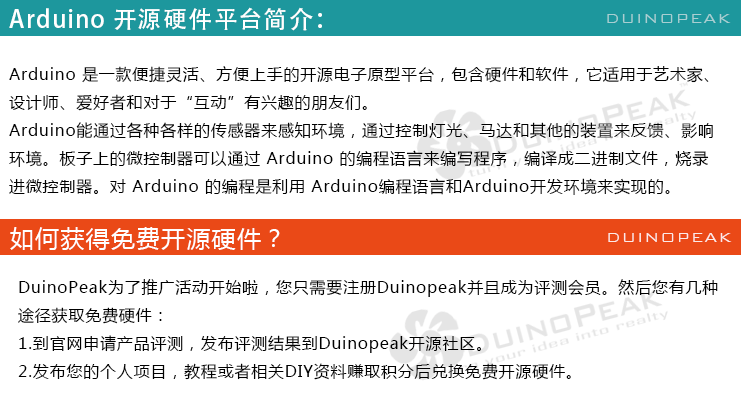
<style>
.page{position:relative;width:741px;height:401px;background:#ffffff}
.page>*{position:absolute;margin:0}
.t1{font:24px "AdobeHeitiStd-Regular";letter-spacing:0.05em;color:#ffffff}
.t2{font:18px "BankGothicBT-Light";letter-spacing:0.05em;color:#a8cfd2}
.t3{font:16px "MicrosoftYaHei";letter-spacing:0.05em;color:#000000}
.t4{font:24px "MicrosoftYaHei";letter-spacing:0.05em;color:#ffffff}
.t5{font:18px "BankGothicBT-Light";letter-spacing:0.05em;color:#ffffff}
</style>
<div class="page">
<p class="t1" style="left:9px;top:7px;width:313px;height:24px">Arduino 开源硬件平台简介：</p>
<p class="t2" style="left:607px;top:14px;width:124px;height:9px">DUINOPEAK</p>
<p class="t3" style="left:9px;top:66px;width:704px;height:129px">Arduino 是一款便捷灵活、方便上手的开源电子原型平台，包含硬件和软件，它适用于艺术家、<br>设计师、爱好者和对于“互动”有兴趣的朋友们。 <br>Arduino能通过各种各样的传感器来感知环境，通过控制灯光、马达和其他的装置来反馈、影响<br>环境。板子上的微控制器可以通过 Arduino 的编程语言来编写程序，编译成二进制文件，烧录<br>进微控制器。对 Arduino 的编程是利用 Arduino编程语言和Arduino开发环境来实现的。</p>
<p class="t4" style="left:10px;top:227px;width:270px;height:23px">如何获得免费开源硬件？</p>
<p class="t5" style="left:608px;top:233px;width:124px;height:9px;opacity:0.85">DUINOPEAK</p>
<p class="t3" style="left:18px;top:279px;width:700px;height:101px">DuinoPeak为了推广活动开始啦，您只需要注册Duinopeak并且成为评测会员。然后您有几种<br>途径获取免费硬件：<br>1.到官网申请产品评测，发布评测结果到Duinopeak开源社区。<br>2.发布您的个人项目，教程或者相关DIY资料赚取积分后兑换免费开源硬件。</p>
</div>
